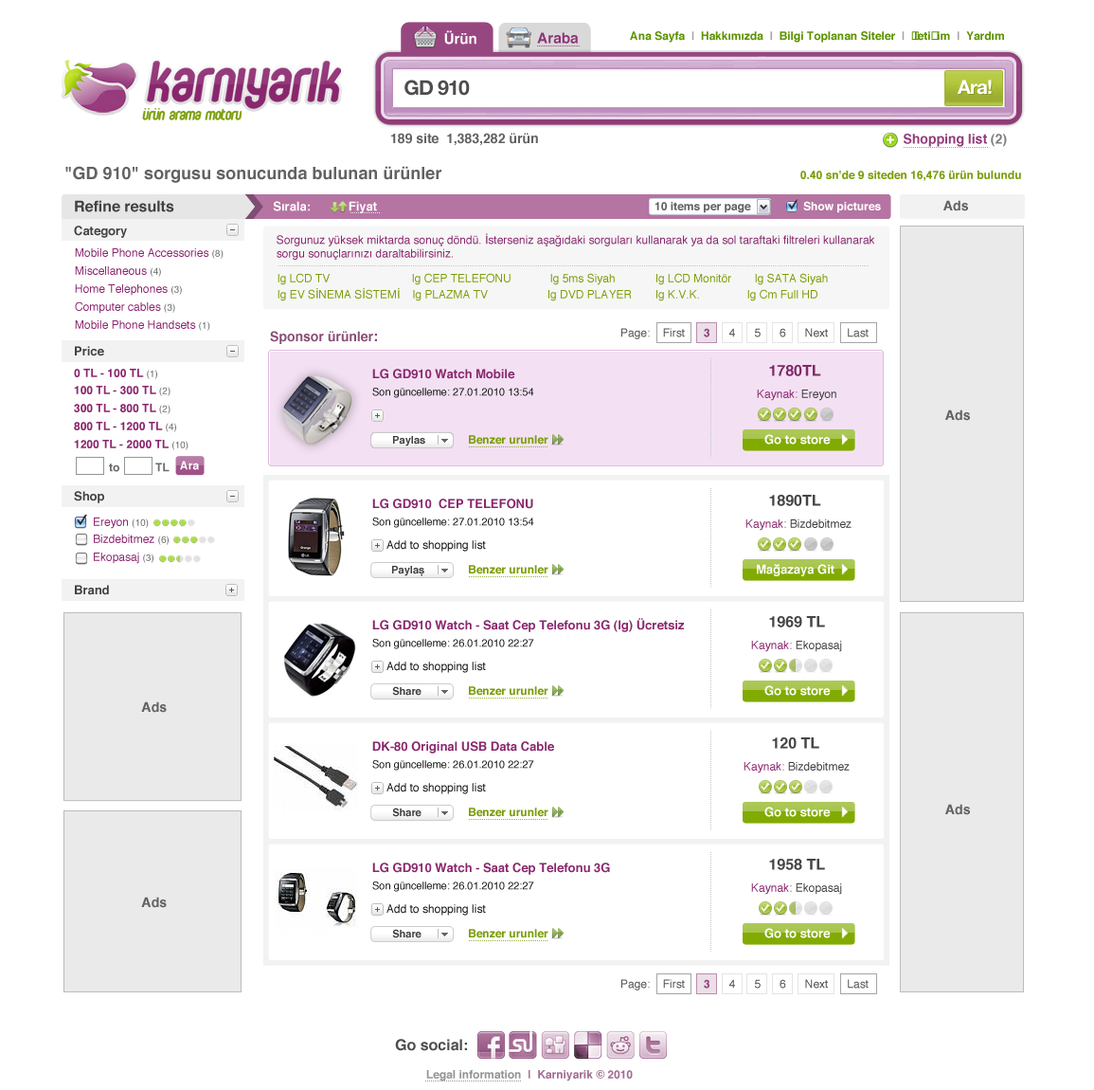
<style>
.page{position:relative;width:1094px;height:1090px;background:#ffffff}
.page>*{position:absolute;margin:0}
.t1{font:14.4px "Helvetica-Bold";color:#ffffff}
.t2{font:14.4px "Helvetica-Bold";color:#ffffff;text-transform:uppercase}
.t3{font:14.4px "Helvetica-Bold";color:#8f3275}
.t4{font:11.4px "Helvetica-Bold";color:#5d9300}
.t5{font:11.4px "Helvetica-Bold";color:#cccccc}
.t6{font:11.4px "Helvetica-Bold";color:#a3a3a3}
.t7{font:11.4px "Helvetica-Bold";color:#a4a4a4}
.t8{font:20px "HelveticaNeue-Bold";letter-spacing:-0.035em;color:#4d4d4d}
.t9{font:19.2px "HelveticaNeue-Bold";letter-spacing:-0.035em;color:#ffffff}
.t10{font:13.3px "Helvetica-Bold";color:#626262}
.t11{font:13.3px "Helvetica-Bold";color:#913c79}
.t12{font:13.3px "Helvetica-Bold";color:#7d7d7d}
.t13{font:17.1px "Helvetica-Bold";color:#626262}
.t14{font:11.4px "Helvetica-Bold";color:#7a9d07}
.t15{font:15.2px "Helvetica-Bold";color:#414141}
.t16{font:12.3px "Helvetica-Bold";color:#ffffff}
.t17{font:11.4px "Helvetica-Bold";color:#626262}
.t18{font:11.4px "Helvetica-Bold";color:#ffffff}
.t19{font:12.3px "Helvetica-Bold";color:#414141}
.t20{font:11.4px "Helvetica";color:#89266d}
.t21{font:11.4px "Helvetica";color:#8b256e}
.t22{font:9.5px "Helvetica";color:#717171}
.t23{font:11.4px/16.1px "Helvetica";color:#7a9d07}
.t24{font:11.4px "Helvetica";color:#505050}
.t25{font:11.4px "Helvetica-Bold";color:#94407c}
.t26{font:13.3px "Helvetica-Bold";color:#884f77}
.t27{font:15.2px "Helvetica-Bold";color:#884f77}
.t28{font:15.2px "Helvetica-Bold";color:#7f2b68}
.t29{font:11.4px "Helvetica-Bold";color:#8b256e}
.t30{font:12.3px "Helvetica-Bold";color:#89266d}
.t31{font:10.4px "Helvetica";color:#141414}
.t32{font:11.4px "Helvetica";color:#3d3d3d}
.t33{font:10.4px "Helvetica-Bold";color:#3d3d3d}
.t34{font:11.4px "Helvetica-Bold";color:#6b6b6b}
.t35{font:15.2px "Helvetica-Bold";color:#454545}
.t36{font:11.4px "Helvetica";color:#141414}
.t37{font:15.2px "Helvetica-Bold";color:#4d4d4d}
.t38{font:11.4px "Helvetica-Bold";color:#a26f94}
.t39{font:11.4px "Helvetica-Bold";color:#959595}
</style>
<div class="page">
<p class="t1" style="left:444px;top:30px;width:33px;height:15px"><span class="t2">ü</span>rün</p>
<p class="t3" style="left:537px;top:32px;width:42px;height:12px">Araba</p>
<p class="t4" style="left:630px;top:31px;width:374px;height:12px"><span class="t5"><br></span>Ana Sayfa  <span class="t6">|</span>  Hakkımızda  <span class="t7">|</span>  Bilgi Toplanan Siteler  <span class="t7">|</span>  İletişim <span class="t7"> | </span> Yardım</p>
<p class="t8" style="left:405px;top:80px;width:65px;height:16px">GD 910</p>
<p class="t9" style="left:958px;top:80px;width:34px;height:15px">Ara!</p>
<p class="t10" style="left:391px;top:133px;width:147px;height:13px">189 site  1,383,282 ürün</p>
<p class="t11" style="left:904px;top:134px;width:103px;height:13px">Shopping list <span class="t12">(2)</span></p>
<p class="t13" style="left:65px;top:166px;width:377px;height:17px">"GD 910" sorgusu sonucunda bulunan ürünler</p>
<p class="t14" style="left:801px;top:171px;width:220px;height:10px">0.40 sn'de 9 siteden 16,476 ürün bulundu</p>
<p class="t15" style="left:75px;top:200px;width:99px;height:12px">Refine results</p>
<p class="t16" style="left:273px;top:201px;width:104px;height:12px">Sırala:           Fiyat</p>
<p class="t17" style="left:655px;top:202px;width:96px;height:11px">10 items per page</p>
<p class="t18" style="left:803px;top:201px;width:78px;height:12px">Show pictures</p>
<p class="t10" style="left:944px;top:200px;width:24px;height:11px">Ads</p>
<p class="t19" style="left:74px;top:226px;width:53px;height:12px">Category</p>
<p class="t20" style="left:277px;top:233px;width:598px;height:27px">Sorgunuz yüksek miktarda sonuç döndü. İsterseniz aşağıdaki sorguları kullanarak ya da sol taraftaki filtreleri kullanarak sorgu sonuçlarınızı daraltabilirsiniz.</p>
<p class="t21" style="left:75px;top:248px;width:149px;height:11px">Mobile Phone Accessories <span class="t22">(8)</span></p>
<p class="t21" style="left:75px;top:266px;width:86px;height:11px">Miscellaneous <span class="t22">(4)</span></p>
<p class="t23" style="left:278px;top:273px;width:550px;height:28px">lg LCD TV                          lg CEP TELEFONU   lg 5ms Siyah    lg LCD Monitör   lg SATA Siyah  <br>lg EV SİNEMA SİSTEMİ    lg PLAZMA TV            lg DVD PLAYER   lg K.V.K.               lg Cm Full HD</p>
<p class="t21" style="left:75px;top:284px;width:107px;height:12px">Home Telephones <span class="t22">(3)</span></p>
<p class="t21" style="left:75px;top:301px;width:100px;height:13px">Computer cables <span class="t22">(3)</span></p>
<p class="t21" style="left:75px;top:320px;width:135px;height:11px">Mobile Phone Handsets <span class="t22">(1)</span></p>
<p class="t24" style="left:622px;top:328px;width:247px;height:11px">Page:    First      <span class="t25">3</span>      4      5      6      Next      Last</p>
<p class="t26" style="left:270px;top:331px;width:107px;height:13px">Sponsor ürünler<span class="t27">:</span></p>
<p class="t19" style="left:75px;top:346px;width:29px;height:10px">Price</p>
<p class="t28" style="left:769px;top:365px;width:52px;height:11px">1780TL</p>
<p class="t29" style="left:74px;top:369px;width:83px;height:10px">0 TL - 100 TL <span class="t22">(1)</span></p>
<p class="t30" style="left:372px;top:369px;width:143px;height:10px">LG GD910 Watch Mobile</p>
<p class="t29" style="left:74px;top:386px;width:97px;height:10px">100 TL - 300 TL <span class="t22">(2)</span></p>
<p class="t31" style="left:372px;top:388px;width:162px;height:10px">Son güncelleme: 27.01.2010 13:54</p>
<p class="t20" style="left:757px;top:389px;width:80px;height:12px">Kaynak: <span class="t32">Ereyon</span></p>
<p class="t29" style="left:74px;top:404px;width:97px;height:10px">300 TL - 800 TL <span class="t22">(2)</span></p>
<p class="t10" style="left:946px;top:409px;width:24px;height:12px">Ads</p>
<p class="t29" style="left:74px;top:422px;width:102px;height:10px">800 TL - 1200 TL <span class="t22">(4)</span></p>
<p class="t33" style="left:393px;top:436px;width:32px;height:10px">Paylas</p>
<p class="t14" style="left:469px;top:435px;width:80px;height:9px">Benzer urunler</p>
<p class="t16" style="left:765px;top:434px;width:66px;height:10px">Go to store</p>
<p class="t29" style="left:74px;top:440px;width:115px;height:10px">1200 TL - 2000 TL <span class="t22">(10)</span></p>
<p class="t18" style="left:180px;top:460px;width:19px;height:10px">Ara</p>
<p class="t34" style="left:109px;top:463px;width:10px;height:9px">to</p>
<p class="t34" style="left:155px;top:462px;width:15px;height:10px">TL</p>
<p class="t19" style="left:74px;top:491px;width:30px;height:12px">Shop</p>
<p class="t35" style="left:769px;top:495px;width:52px;height:11px">1890TL</p>
<p class="t30" style="left:372px;top:498px;width:161px;height:11px">LG GD910  CEP TELEFONU</p>
<p class="t21" style="left:94px;top:517px;width:55px;height:12px">Ereyon <span class="t22">(10)</span></p>
<p class="t31" style="left:372px;top:517px;width:162px;height:11px">Son güncelleme: 27.01.2010 13:54</p>
<p class="t32" style="left:746px;top:519px;width:106px;height:12px"><span class="t20">Kaynak: </span>Bizdebitmez</p>
<p class="t21" style="left:94px;top:534px;width:75px;height:11px">Bizdebitmez <span class="t22">(6)</span></p>
<p class="t36" style="left:387px;top:540px;width:99px;height:11px">Add to shopping list</p>
<p class="t21" style="left:94px;top:552px;width:59px;height:12px">Ekopasaj <span class="t22">(3)</span></p>
<p class="t33" style="left:392px;top:566px;width:32px;height:10px">Paylas</p>
<p class="t14" style="left:469px;top:565px;width:80px;height:9px">Benzer urunler</p>
<p class="t16" style="left:757px;top:564px;width:78px;height:12px">Magazaya Git</p>
<p class="t33" style="left:421px;top:574px;width:2px;height:2px">.</p>
<p class="t19" style="left:75px;top:585px;width:34px;height:10px">Brand</p>
<p class="t30" style="left:372px;top:618px;width:312px;height:14px">LG GD910 Watch - Saat Cep Telefonu 3G (lg) Ücretsiz</p>
<p class="t35" style="left:769px;top:616px;width:56px;height:11px">1969 TL</p>
<p class="t31" style="left:372px;top:639px;width:162px;height:10px">Son güncelleme: 26.01.2010 22:27</p>
<p class="t32" style="left:751px;top:641px;width:91px;height:11px"><span class="t20">Kaynak: </span>Ekopasaj</p>
<p class="t36" style="left:387px;top:661px;width:99px;height:12px">Add to shopping list</p>
<p class="t33" style="left:392px;top:686px;width:30px;height:9px">Share</p>
<p class="t14" style="left:469px;top:686px;width:80px;height:9px">Benzer urunler</p>
<p class="t16" style="left:765px;top:685px;width:66px;height:10px">Go to store</p>
<p class="t10" style="left:141px;top:701px;width:26px;height:12px">Ads</p>
<p class="t35" style="left:772px;top:737px;width:48px;height:12px">120 TL</p>
<p class="t30" style="left:372px;top:741px;width:182px;height:12px">DK-80 Original USB Data Cable</p>
<p class="t31" style="left:372px;top:760px;width:162px;height:10px">Son güncelleme: 26.01.2010 22:27</p>
<p class="t32" style="left:744px;top:762px;width:106px;height:11px"><span class="t20">Kaynak: </span>Bizdebitmez</p>
<p class="t36" style="left:387px;top:783px;width:99px;height:11px">Add to shopping list</p>
<p class="t33" style="left:392px;top:807px;width:30px;height:10px">Share</p>
<p class="t14" style="left:469px;top:807px;width:80px;height:10px">Benzer urunler</p>
<p class="t16" style="left:765px;top:806px;width:66px;height:11px">Go to store</p>
<p class="t10" style="left:946px;top:803px;width:24px;height:12px">Ads</p>
<p class="t30" style="left:372px;top:862px;width:238px;height:13px">LG GD910 Watch - Saat Cep Telefonu 3G</p>
<p class="t35" style="left:769px;top:858px;width:56px;height:12px">1958 TL</p>
<p class="t31" style="left:372px;top:881px;width:162px;height:11px">Son güncelleme: 26.01.2010 22:27</p>
<p class="t32" style="left:751px;top:883px;width:91px;height:11px"><span class="t20">Kaynak: </span>Ekopasaj</p>
<p class="t10" style="left:141px;top:896px;width:26px;height:12px">Ads</p>
<p class="t36" style="left:387px;top:904px;width:99px;height:11px">Add to shopping list</p>
<p class="t33" style="left:392px;top:929px;width:30px;height:9px">Share</p>
<p class="t14" style="left:469px;top:929px;width:80px;height:9px">Benzer urunler</p>
<p class="t16" style="left:765px;top:928px;width:66px;height:10px">Go to store</p>
<p class="t24" style="left:622px;top:979px;width:247px;height:11px">Page:    First      <span class="t25">3</span>      4      5      6      Next      Last</p>
<p class="t37" style="left:395px;top:1038px;width:72px;height:13px">Go social:</p>
<p class="t38" style="left:426px;top:1070px;width:207px;height:11px"><span class="t39">Legal information</span>  |  Karniyarik © 2010</p>
</div>
